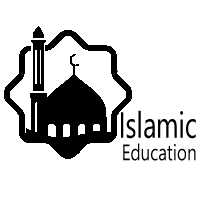
<style>
.page{position:relative;width:200px;height:200px;background:#ffffff}
.page>*{position:absolute;margin:0}
.t1{font:36.6px "SegoeUI";color:#000000;scale:0.71 1}
.t2{font:22.6px "SegoeUI";color:#000000;scale:0.76 1}
</style>
<div class="page">
<p class="t1" style="left:121px;top:110px;width:75px;height:29px">Islamic</p>
<p class="t2" style="left:123px;top:143px;width:73px;height:18px">Education</p>
</div>
